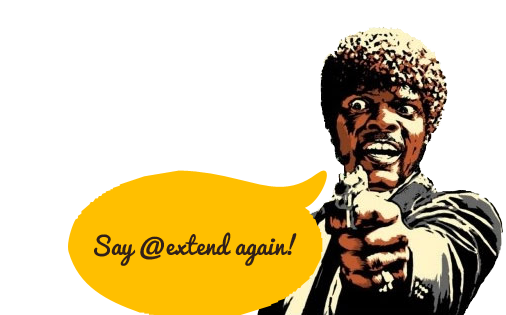
<style>
.page{position:relative;width:506px;height:315px;background:#ffffff}
.page>*{position:absolute;margin:0}
.t1{font:24px "Pacifico-Regular";color:#312019}
</style>
<div class="page">
<p class="t1" style="left:94px;top:232px;width:203px;height:34px">Say @extend again!</p>
</div>
